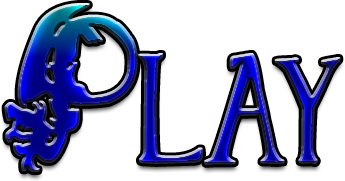
<style>
.page{position:relative;width:345px;height:181px;background:#ffffff}
.page>*{position:absolute;margin:0}
.t1{font:108px "EGDragonCaps";font-weight:bold;scale:0.83 1}
</style>
<div class="page">
<p class="t1" style="left:4px;top:3px;width:337px;height:169px">Play</p>
</div>
